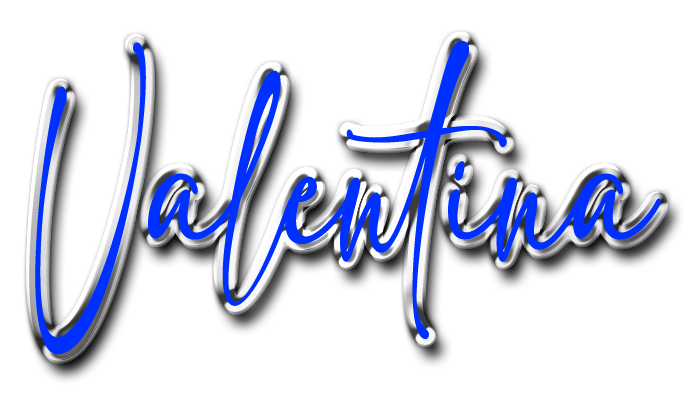
<style>
.page{position:relative;width:687px;height:417px;background:#ffffff}
.page>*{position:absolute;margin:0}
.t1{font:169px "adelia";letter-spacing:0.01em;color:#0030ff;scale:0.62 1}
</style>
<div class="page">
<p class="t1" style="left:35px;top:40px;width:626px;height:315px">Valentina</p>
</div>
